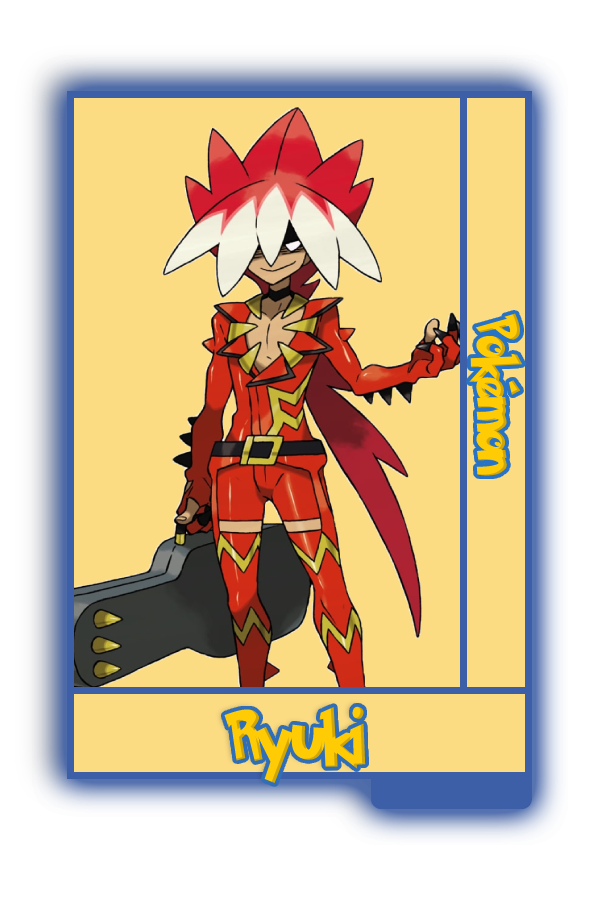
<style>
.page{position:relative;width:600px;height:900px;background:#fbdc83}
.page>*{position:absolute;margin:0}
.t1{font:48.8px "PokemonSolidNormal";color:#ffcb05;scale:0.8 1}
.t2{font:56.6px "PokemonSolidNormal";color:#ffcb05;scale:0.92 1}
</style>
<div class="page">
<p class="t1" style="left:469px;top:313px;width:54px;height:163px;rotate:90deg">Pokémon</p>
<p class="t2" style="left:224px;top:706px;width:142px;height:77px">Ryuki</p>
</div>
